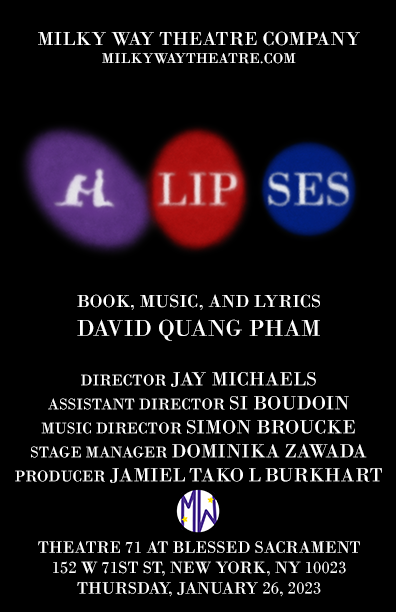
<style>
.page{position:relative;width:396px;height:612px;background:#000000}
.page>*{position:absolute;margin:0}
.t1{font:20px "BodoniMT";color:#ffffff}
.t2{font:15px "BodoniMT";color:#ffffff}
.t3{font:18.4px "BodoniMT";color:#ffffff}
.t4{font:24px "BodoniMT";color:#ffffff}
.t5{font:16px "BodoniMT";color:#ffffff}
.t6{font:17px "BodoniMT";color:#ffffff}
</style>
<div class="page">
<p class="t1" style="left:38px;top:31px;width:322px;height:33px;text-align:center">MILKY WAY THEATRE COMPANY<br><span class="t2">MILKYWAYTHEATRE.COM</span></p>
<p class="t3" style="left:77px;top:294px;width:243px;height:47px;text-align:center">BOOK, MUSIC, AND LYRICS<br><span class="t4">DAVID QUANG PHAM</span></p>
<p class="t1" style="left:15px;top:372px;width:367px;height:111px;text-align:center"><span class="t5">DIRECTOR </span>JAY MICHAELS<br><span class="t5">ASSISTANT DIRECTOR </span>SI BOUDOIN<br><span class="t5">MUSIC DIRECTOR </span>SIMON BROUCKE<br><span class="t5">STAGE MANAGER </span>DOMINIKA ZAWADA<br><span class="t5">PRODUCER </span>JAMIEL TAKO L BURKHART</p>
<p class="t6" style="left:38px;top:541px;width:322px;height:56px;text-align:center">THEATRE 71 AT BLESSED SACRAMENT<br>152 W 71ST ST, NEW YORK, NY 10023<br>THURSDAY, JANUARY 26, 2023</p>
</div>
